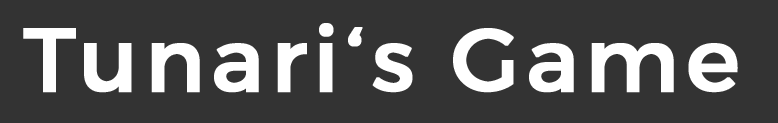
<style>
.page{position:relative;width:778px;height:123px;background:#333333}
.page>*{position:absolute;margin:0}
.t1{font:90px "Montserrat-Regular";letter-spacing:0.05em;color:#ffffff;font-weight:bold}
</style>
<div class="page">
<p class="t1" style="left:23px;top:23px;width:715px;height:70px">Tunari‘s Game</p>
</div>
